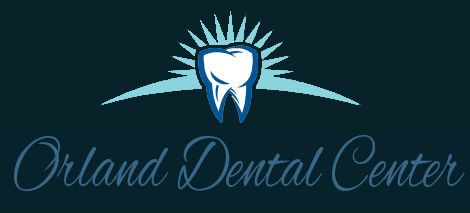
<style>
.page{position:relative;width:470px;height:213px;background:#072229}
.page>*{position:absolute;margin:0}
.t1{font:78.4px "AlexBrush-Regular";color:#386889;scale:0.72 1}
</style>
<div class="page">
<p class="t1" style="left:14px;top:135px;width:451px;height:56px">Orland Dental Center</p>
</div>
